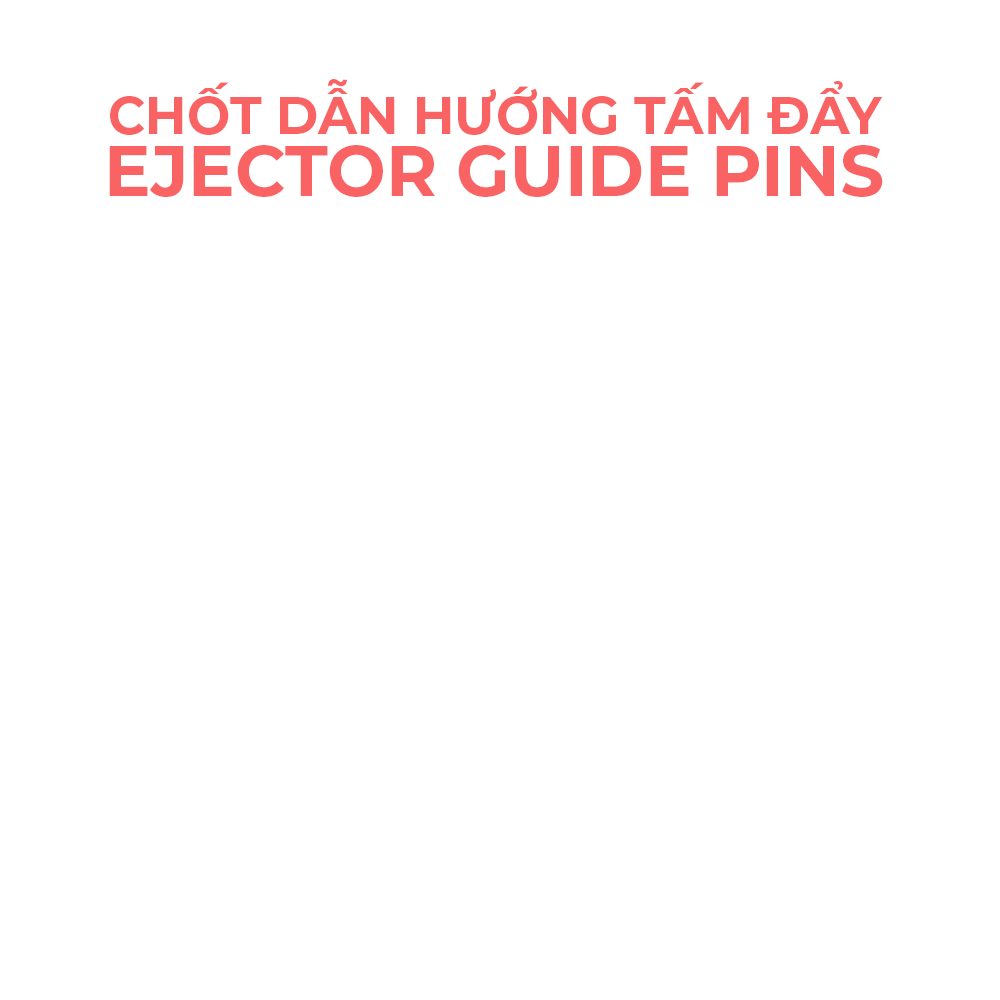
<style>
.page{position:relative;width:1000px;height:1000px;background:#ffffff}
.page>*{position:absolute;margin:0}
.t1{font:51px "Montserrat-Bold";color:#fa6363;text-transform:uppercase}
</style>
<div class="page">
<p class="t1" style="left:109px;top:79px;width:774px;height:118px">Chốt dẫn hướng tấm đẩy Ejector Guide Pins</p>
</div>
